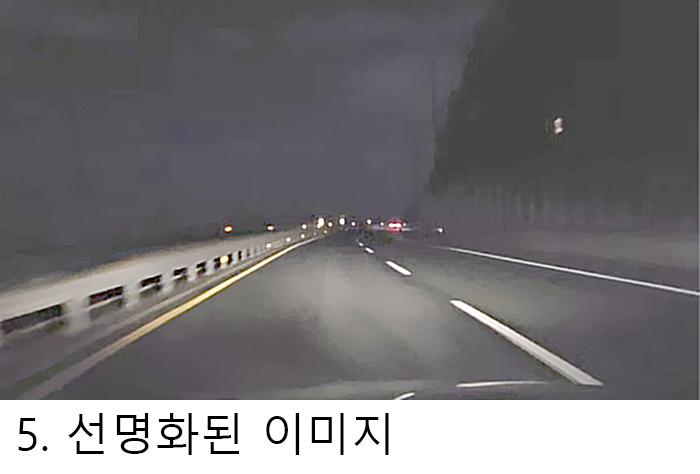
<style>
.page{position:relative;width:700px;height:474px}
.page>*{position:absolute;margin:0}
.t1{font:45px "MalgunGothic";color:#000000}
</style>
<div class="page">
<p class="t1" style="left:18px;top:413px;width:371px;height:42px">5. 선명화된 이미지</p>
</div>
